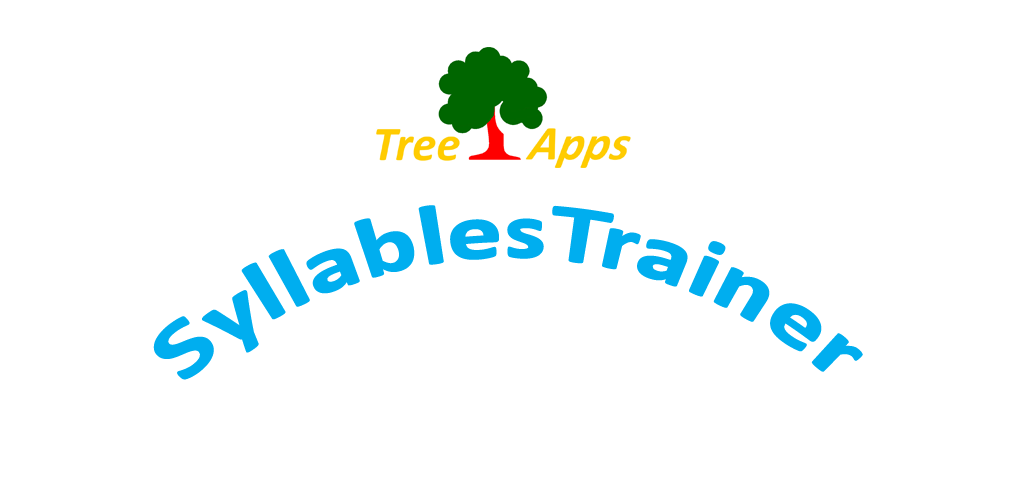
<style>
.page{position:relative;width:1024px;height:500px;background:#ffffff}
.page>*{position:absolute;margin:0}
.t1{font:88.2px "Calibri-Bold";color:#00aeef;scale:1.06 1}
</style>
<div class="page">
<p class="t1" style="left:153px;top:205px;width:710px;height:175px">SyllablesTrainer</p>
</div>
